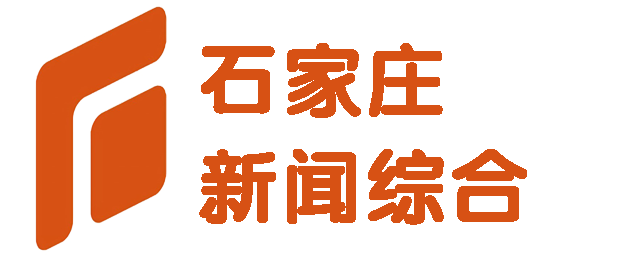
<style>
.page{position:relative;width:627px;height:263px;background:#ffffff}
.page>*{position:absolute;margin:0}
.t1{font:80px/106.7px "FZY4JW--GB1-0";letter-spacing:0.02em;color:#d75114;font-weight:bold}
</style>
<div class="page">
<p class="t1" style="left:199px;top:43px;width:328px;height:182px">石家庄<br>新闻综合</p>
</div>
